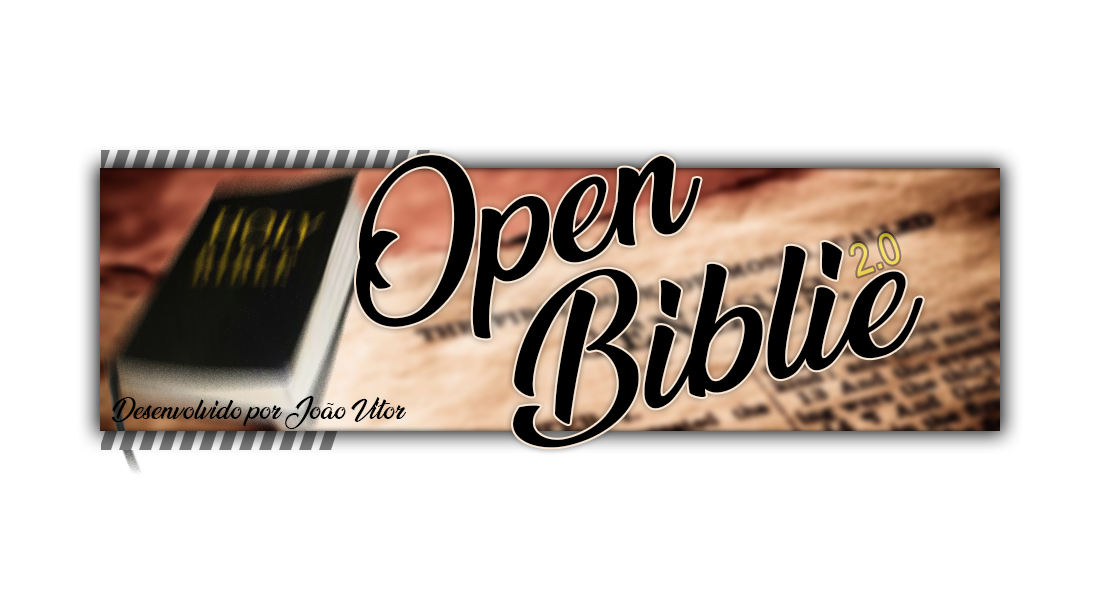
<style>
.page{position:relative;width:1100px;height:600px;background:#ffffff}
.page>*{position:absolute;margin:0}
.t1{font:154.5px "AnandaBlack";color:#000000}
.t2{font:44.3px "ArialNarrow";color:#f1d85d}
.t3{font:158.5px "AnandaBlack";color:#000000}
.t4{font:24px "AnandaBlack";color:#000000}
</style>
<div class="page">
<p class="t1" style="left:356px;top:155px;width:345px;height:184px;rotate:-17deg">Open</p>
<p class="t2" style="left:850px;top:233px;width:50px;height:44px;rotate:-20deg">2.0</p>
<p class="t3" style="left:513px;top:242px;width:410px;height:206px;rotate:-13deg">Biblie</p>
<p class="t4" style="left:111px;top:396px;width:295px;height:33px">Desenvolvido por João Vitor</p>
</div>
